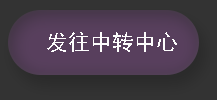
<style>
.page{position:relative;width:217px;height:100px;background:#333333}
.page>*{position:absolute;margin:0}
.t1{font:22px "SimHei";color:#fdfdfd}
.t2{font:22px "SimHei";color:#0c0b0b}
</style>
<div class="page">
<p class="t1" style="left:47px;top:32px;width:130px;height:20px"><span class="t2">    </span>发往中转中心</p>
</div>
